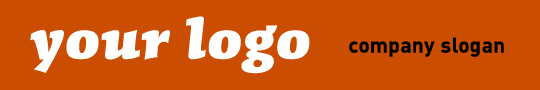
<style>
.page{position:relative;width:540px;height:90px;background:#cb4d01}
.page>*{position:absolute;margin:0}
.t1{font:65px "CongaBravaStd-Black";letter-spacing:0.02em;color:#ffffff}
.t2{font:21px "DINCE-Bold";letter-spacing:0.02em;color:#000000}
</style>
<div class="page">
<p class="t1" style="left:30px;top:16px;width:280px;height:58px">your logo</p>
<p class="t2" style="left:349px;top:37px;width:155px;height:20px">company slogan</p>
</div>
